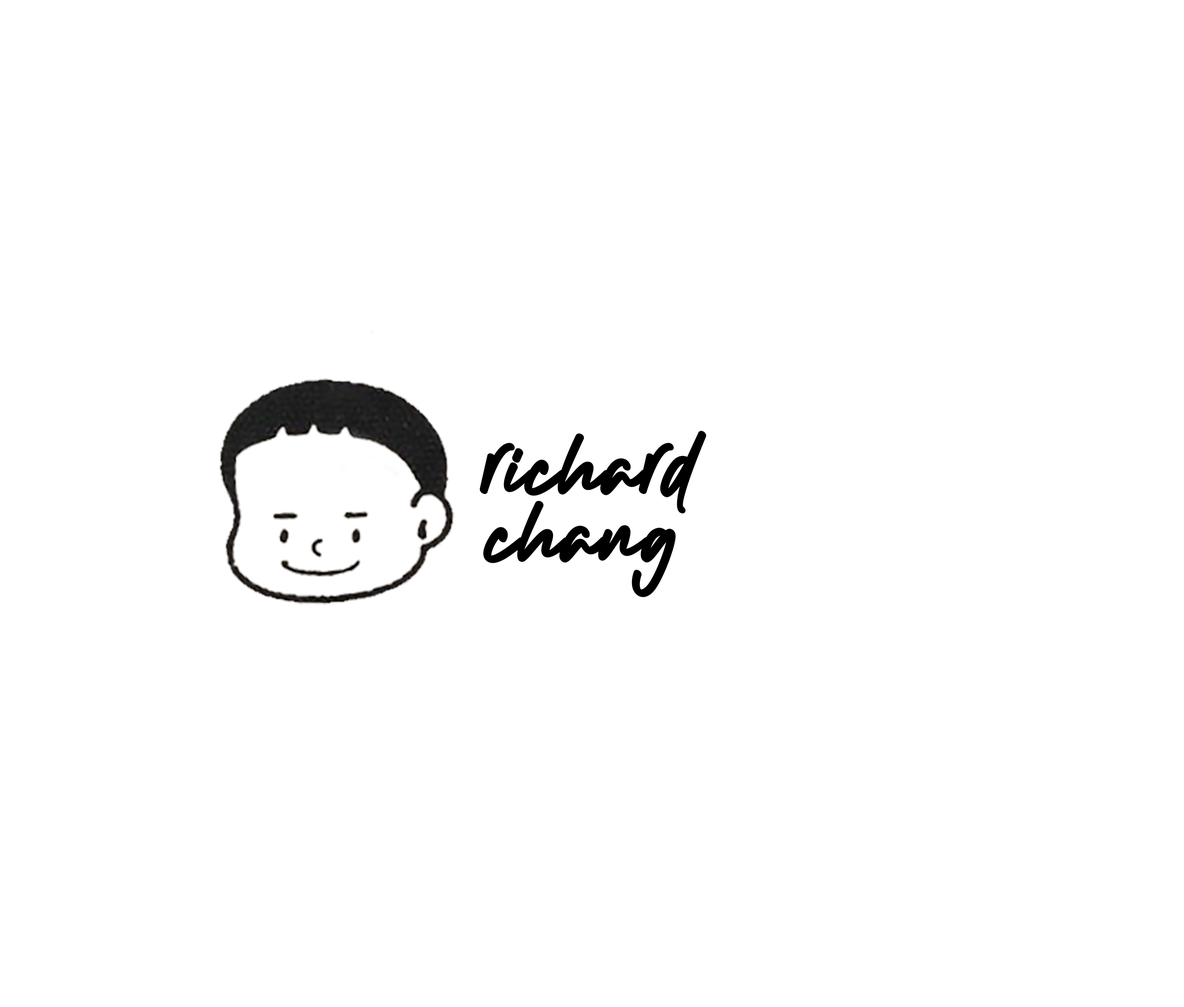
<style>
.page{position:relative;width:1184px;height:1007px;background:#ffffff}
.page>*{position:absolute;margin:0}
.t1{font:61.6px "Outlandersignature";color:#000000;font-weight:bold}
</style>
<div class="page">
<p class="t1" style="left:479px;top:431px;width:227px;height:83px">richard</p>
<p class="t1" style="left:483px;top:501px;width:192px;height:96px">chang</p>
</div>
